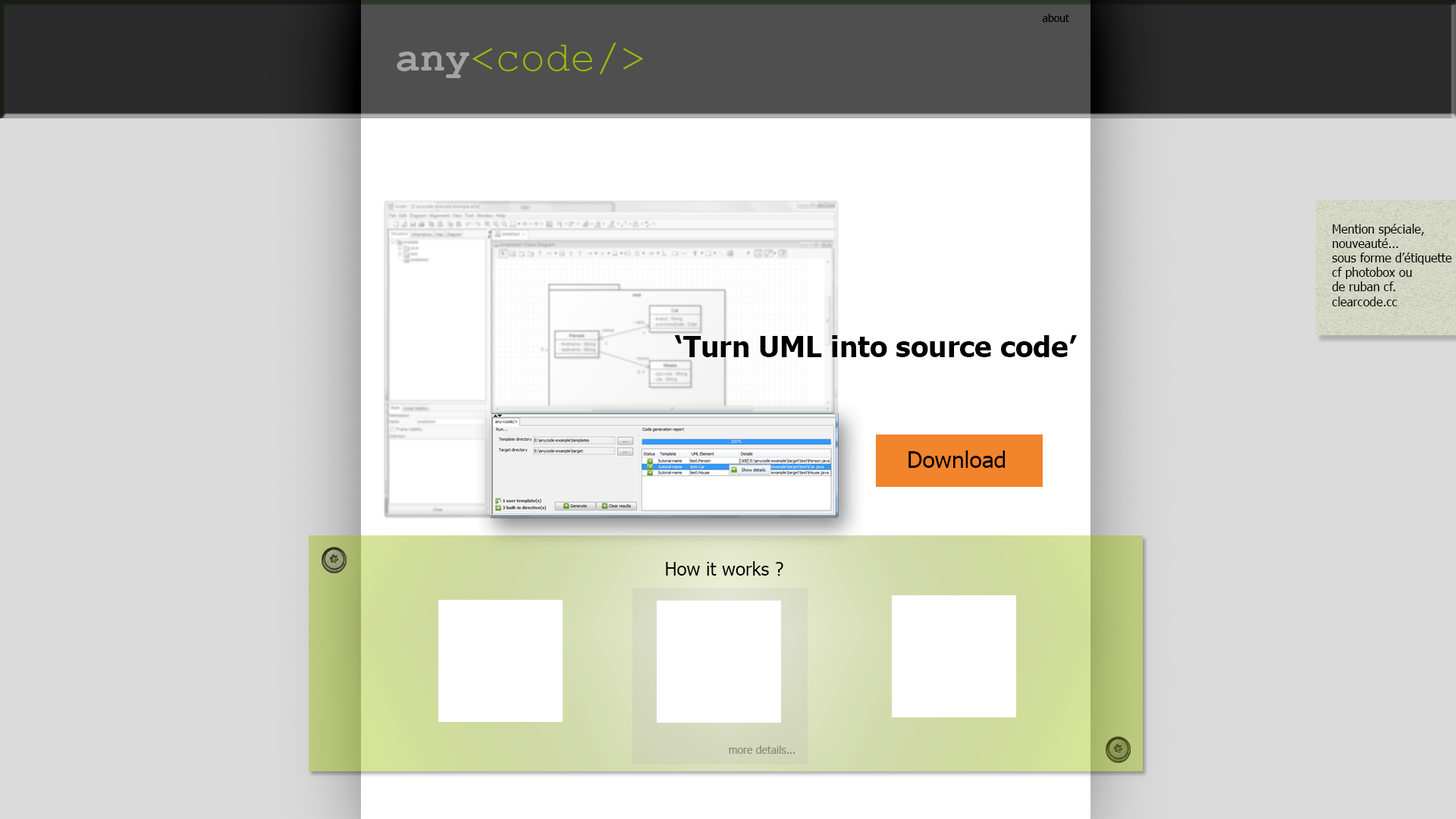
<style>
.page{position:relative;width:1456px;height:819px;background:#dbdbdb}
.page>*{position:absolute;margin:0}
.t1{font:10.6px "Tahoma";color:#000000}
.t2{font:41.7px "CourierNewPSMT";color:#99bb00}
.t3{font:41.7px "CourierNewPS-BoldMT";color:#a6a3a3}
.t4{font:12.1px "Tahoma";color:#000000}
.t5{font:28.8px "Tahoma-Bold";color:#000000}
.t6{font:22.7px "Tahoma";color:#000000}
.t7{font:18.2px "Tahoma";color:#000000}
.t8{font:10.6px "Tahoma";color:#828e70}
</style>
<div class="page">
<p class="t1" style="left:1042px;top:14px;width:27px;height:8px">about</p>
<p class="t2" style="left:397px;top:42px;width:246px;height:36px"><span class="t3">any</span>&lt;code/&gt;</p>
<p class="t4" style="left:1332px;top:224px;width:120px;height:82px">Mention spéciale,<br>nouveauté...<br>sous forme d’étiquette<br>cf photobox ou <br>de ruban cf.<br>clearcode.cc</p>
<p class="t5" style="left:674px;top:335px;width:403px;height:22px">‘Turn UML into source code’</p>
<p class="t6" style="left:908px;top:450px;width:97px;height:18px">Download</p>
<p class="t7" style="left:666px;top:561px;width:117px;height:15px">How it works ?</p>
<p class="t8" style="left:729px;top:745px;width:66px;height:9px">more details...</p>
</div>
